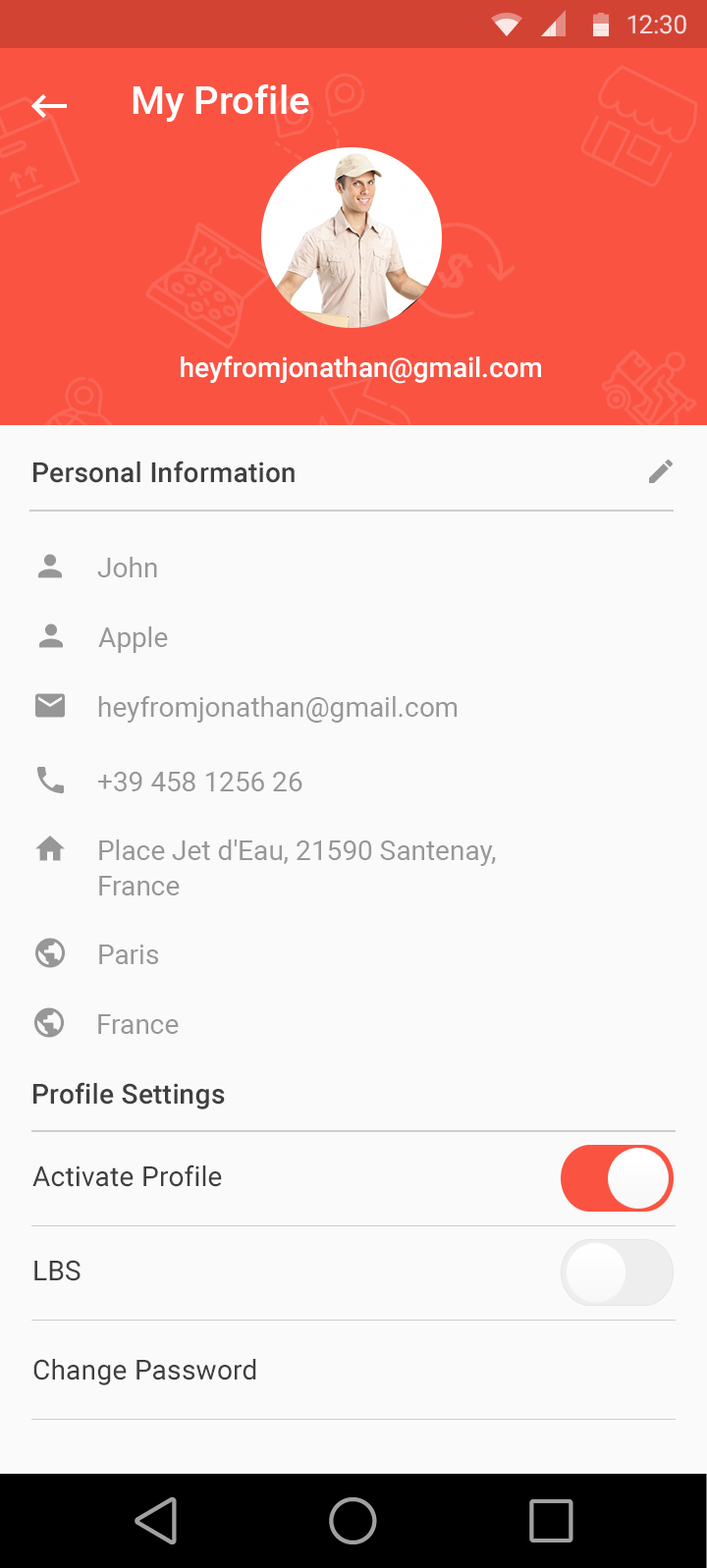
<style>
.page{position:relative;width:707px;height:1568px;background:#fafafa}
.page>*{position:absolute;margin:0}
.t1{font:25.5px "Roboto-Regular";color:#f5dcda}
.t2{font:39.3px "Roboto-Medium";color:#ffffff}
.t3{font:27.5px "Roboto-Medium";color:#ffffff}
.t4{font:27.5px "Roboto-Medium";letter-spacing:0.01em;color:#3f3f3f}
.t5{font:27.5px "Roboto-Regular";color:#979797}
.t6{font:27.5px/35.3px "Roboto-Regular";color:#979797}
.t7{font:27.5px "Roboto-Regular";letter-spacing:0.01em;color:#3f3f3f}
</style>
<div class="page">
<p class="t1" style="left:627px;top:15px;width:59px;height:19px">12:30</p>
<p class="t2" style="left:133px;top:84px;width:176px;height:38px">My Profile</p>
<p class="t3" style="left:181px;top:355px;width:360px;height:29px">heyfromjonathan@gmail.com</p>
<p class="t4" style="left:33px;top:460px;width:262px;height:23px">Personal Information</p>
<p class="t5" style="left:97px;top:557px;width:60px;height:20px">John</p>
<p class="t5" style="left:98px;top:626px;width:70px;height:27px">Apple</p>
<p class="t5" style="left:98px;top:696px;width:360px;height:27px">heyfromjonathan@gmail.com</p>
<p class="t5" style="left:98px;top:772px;width:204px;height:19px">+39 458 1256 26</p>
<p class="t6" style="left:99px;top:839px;width:397px;height:56px">Place Jet d'Eau, 21590 Santenay, <br>France</p>
<p class="t5" style="left:99px;top:945px;width:59px;height:19px">Paris</p>
<p class="t5" style="left:98px;top:1014px;width:81px;height:20px">France</p>
<p class="t4" style="left:33px;top:1082px;width:192px;height:27px">Profile Settings</p>
<p class="t7" style="left:32px;top:1164px;width:190px;height:23px">Activate Profile</p>
<p class="t7" style="left:34px;top:1260px;width:47px;height:21px">LBS</p>
<p class="t7" style="left:33px;top:1359px;width:223px;height:26px">Change Password</p>
</div>
